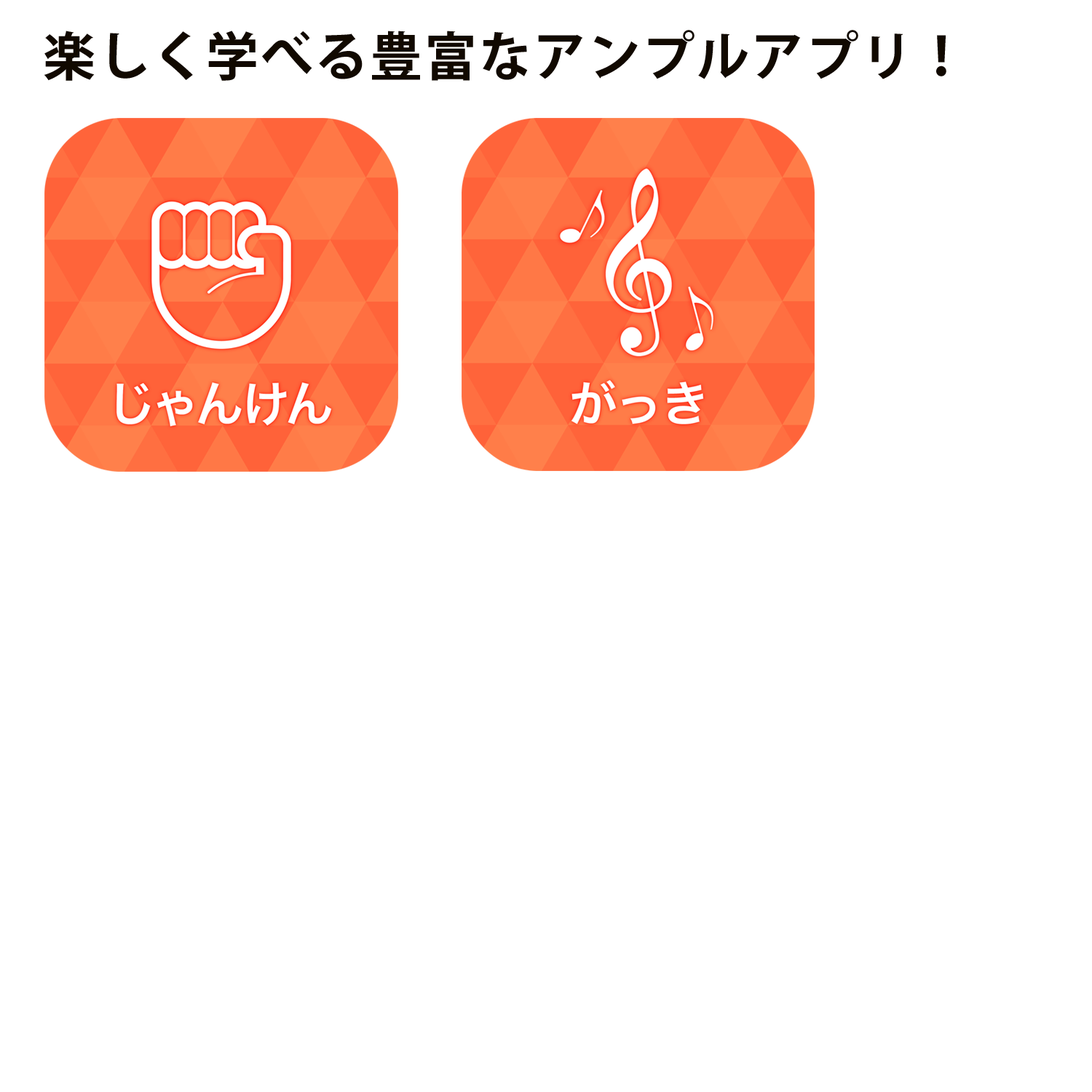
<style>
.page{position:relative;width:1092px;height:1092px;background:#ffffff}
.page>*{position:absolute;margin:0}
.t1{font:52.4px "KozGoPr6N-Bold";letter-spacing:0.04em;color:#110900}
</style>
<div class="page">
<p class="t1" style="left:44px;top:30px;width:902px;height:51px">楽しく学べる豊富なアンプルアプリ！</p>
</div>
